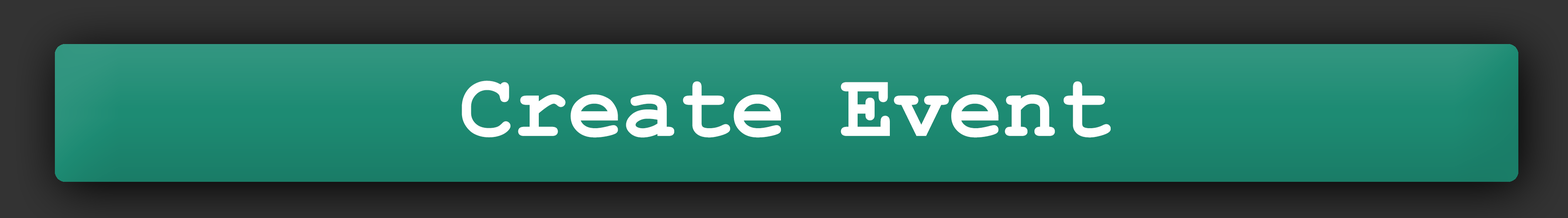
<style>
.page{position:relative;width:1568px;height:218px}
.page>*{position:absolute;margin:0}
.t1{font:90.6px "CourierNewPS-BoldMT";color:#ffffff}
</style>
<div class="page">
<p class="t1" style="left:462px;top:81px;width:649px;height:57px">Create Event</p>
</div>
